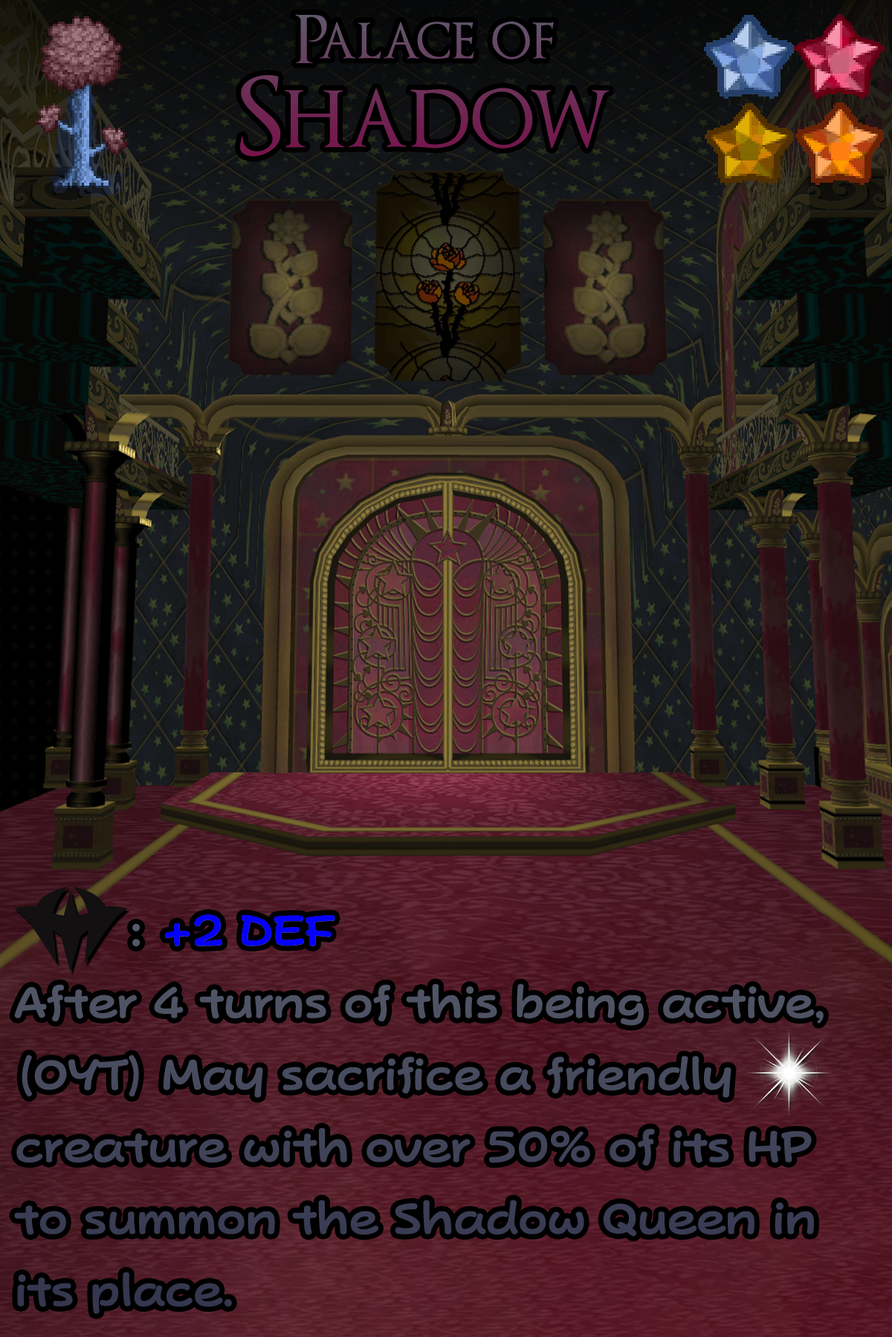
<style>
.page{position:relative;width:892px;height:1337px}
.page>*{position:absolute;margin:0}
.t1{font:111.5px/69.1px "OptimusPrinceps";color:#6f2854}
.t2{font:179.1px/69.1px "OptimusPrinceps";color:#6f2854}
.t3{font:74.3px/72.1px "PopJoyStd-B";color:#41445a}
.t4{font:74.3px "PopJoyStd-B";color:#0600ff}
</style>
<div class="page">
<p class="t1" style="left:240px;top:14px;width:369px;height:143px;text-align:center">Palace of<br><span class="t2">Shadow</span></p>
<p class="t3" style="left:14px;top:915px;width:809px;height:399px">: +2 DEF<br>After 4 turns of this being active,<br>(OYT) May sacrifice a friendly        creature with over 50% of its HP to summon the Shadow Queen in its place.</p>
<p class="t4" style="left:164px;top:915px;width:171px;height:32px">+2 DEF</p>
</div>
